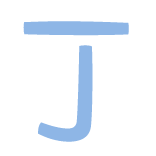
<style>
.page{position:relative;width:156px;height:156px;background:#ffffff}
.page>*{position:absolute;margin:0}
.t1{font:180px "DFWaWaSC-W5";color:#8eb6e6}
</style>
<div class="page">
<p class="t1" style="left:23px;top:21px;width:106px;height:121px">J</p>
</div>
